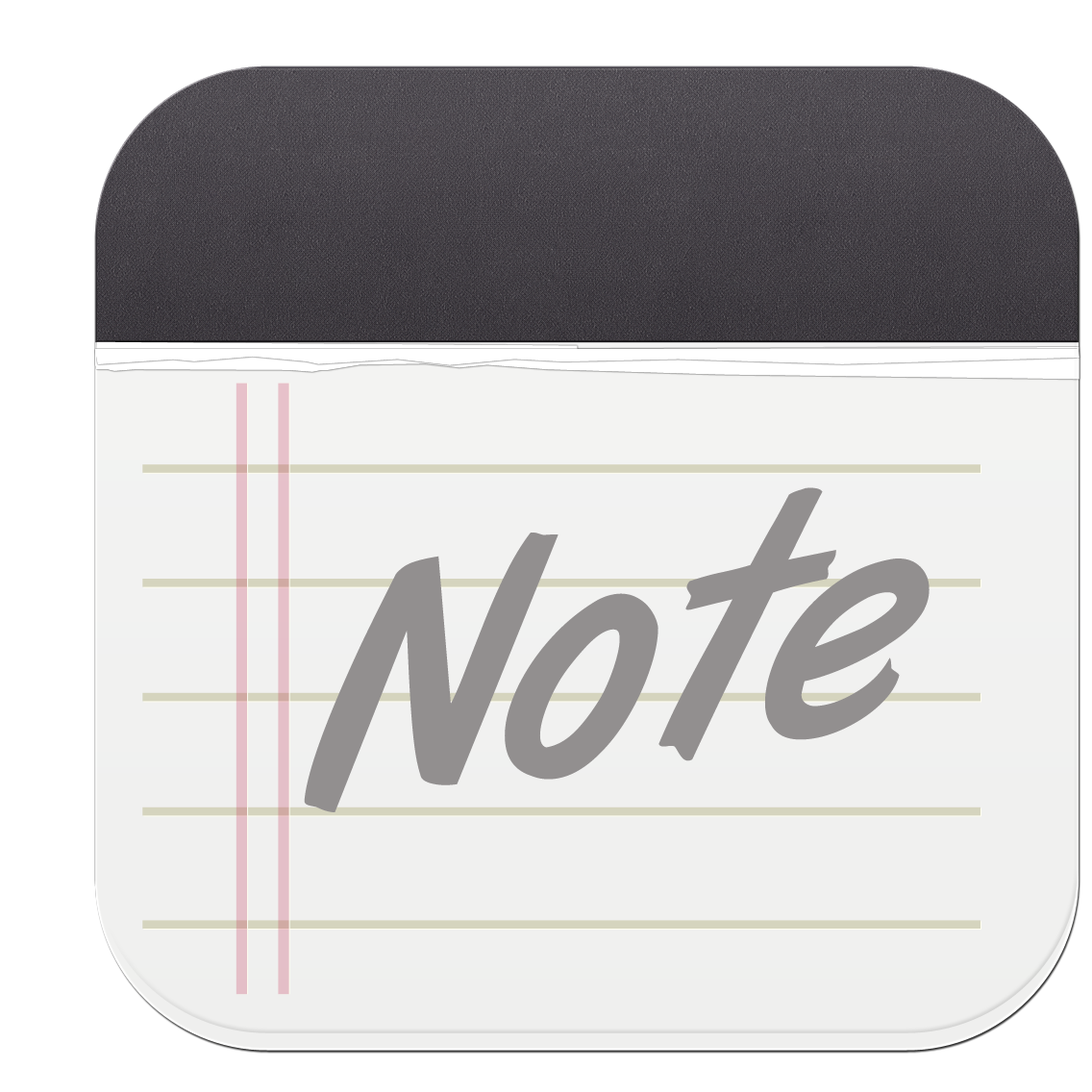
<style>
.page{position:relative;width:1092px;height:1092px;background:#ffffff}
.page>*{position:absolute;margin:0}
.t1{font:329.2px "ArtBrush";color:#928f8f;scale:1.06 1}
</style>
<div class="page">
<p class="t1" style="left:304px;top:487px;width:626px;height:325px;rotate:-9deg">Note</p>
</div>
